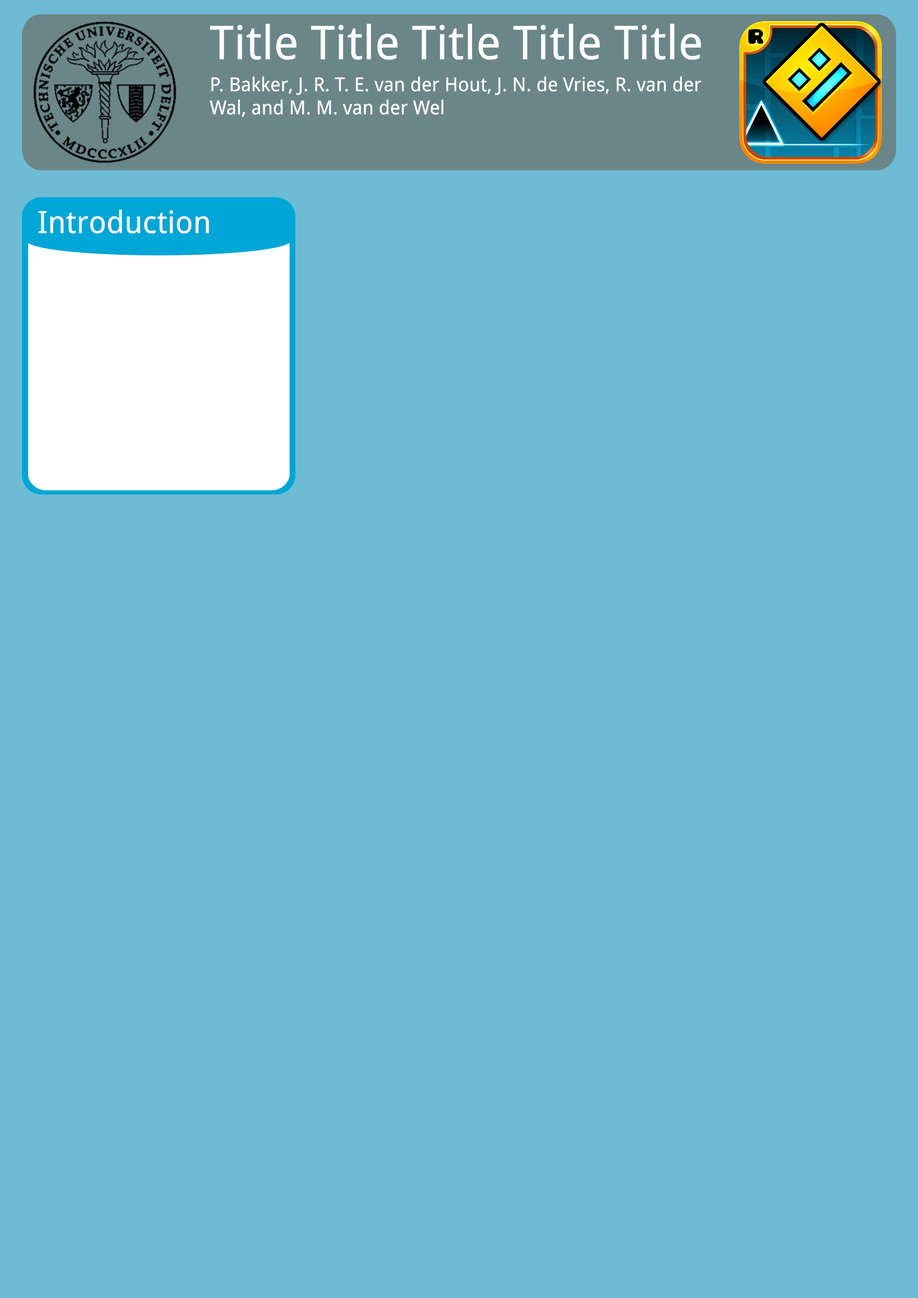
<style>
.page{position:relative;width:918px;height:1298px;background:#6ebbd5}
.page>*{position:absolute;margin:0}
.t1{font:46.6px "DroidSans";color:#ffffff}
.t2{font:19.3px "DroidSans";color:#ffffff}
.t3{font:30.8px "DroidSans";color:#ffffff}
</style>
<div class="page">
<p class="t1" style="left:210px;top:24px;width:492px;height:36px">Title Title Title Title Title</p>
<p class="t2" style="left:210px;top:76px;width:492px;height:41px">P. Bakker, J. R. T. E. van der Hout, J. N. de Vries, R. van der Wal, and M. M. van der Wel</p>
<p class="t3" style="left:39px;top:210px;width:170px;height:23px">Introduction</p>
</div>
